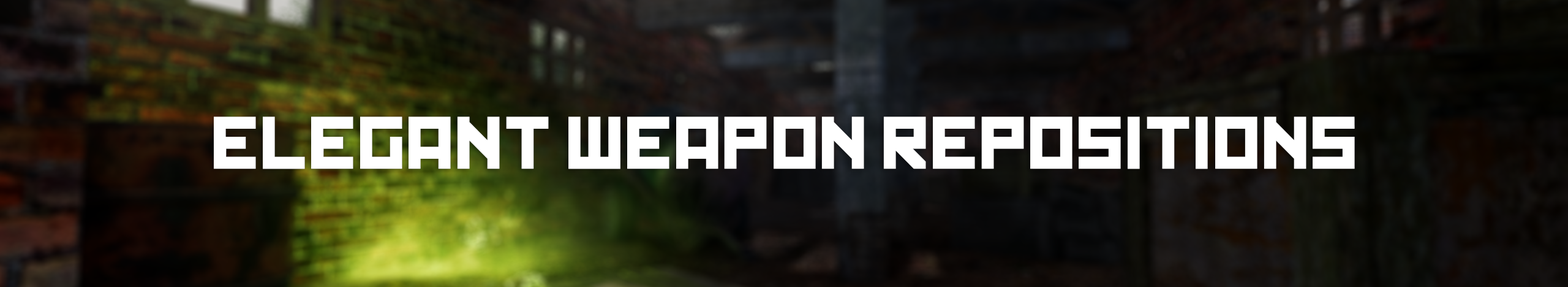
<style>
.page{position:relative;width:1568px;height:287px}
.page>*{position:absolute;margin:0}
.t1{font:70.2px "Kremlin";color:#ffffff;text-transform:uppercase}
</style>
<div class="page">
<p class="t1" style="left:214px;top:116px;width:1141px;height:53px">Elegant weapon repositions</p>
</div>
